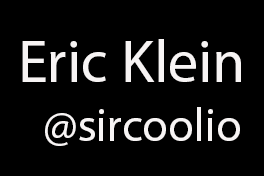
<style>
.page{position:relative;width:264px;height:176px;background:#000000}
.page>*{position:absolute;margin:0}
.t1{font:60px "MyriadPro-Regular";color:#f7f4f4}
.t2{font:46.7px "MyriadPro-Regular";color:#f7f4f4}
</style>
<div class="page">
<p class="t1" style="left:22px;top:39px;width:219px;height:43px">Eric Klein</p>
<p class="t2" style="left:45px;top:107px;width:195px;height:39px">@sircoolio</p>
</div>
